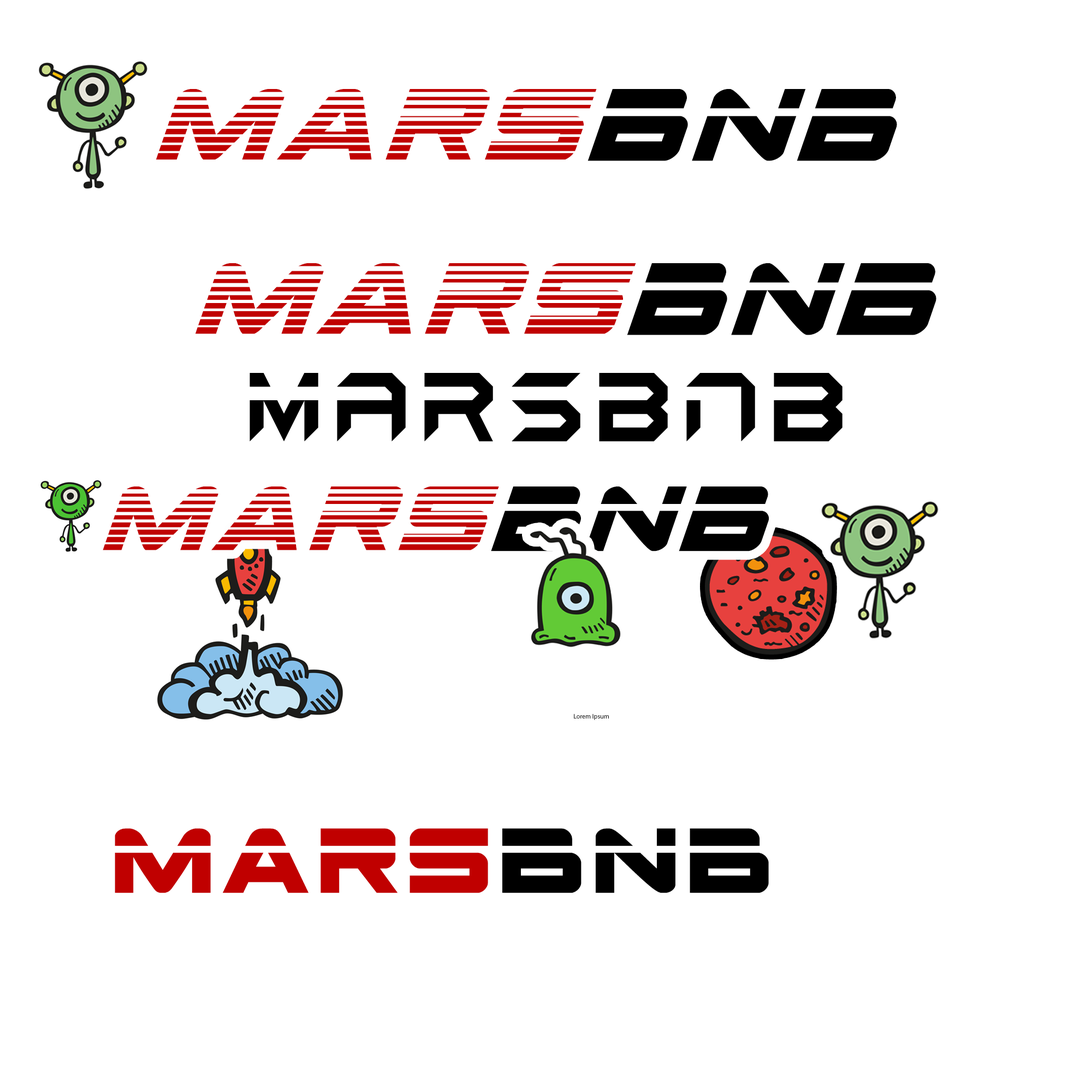
<style>
.page{position:relative;width:1092px;height:1092px;background:#ffffff}
.page>*{position:absolute;margin:0}
.t1{font:142.5px "SpaceRangerGradientItalic";letter-spacing:0.05em;color:#c00000}
.t2{font:142.5px "SpaceRangerLaserItalic";letter-spacing:0.05em;color:#000000}
.t3{font:109.2px "Aerospace";letter-spacing:0.05em;color:#000000}
.t4{font:128.1px "SpaceRangerGradientItalic";letter-spacing:0.05em;color:#c00000}
.t5{font:128.1px "SpaceRangerLaserItalic";letter-spacing:0.05em;color:#000000}
.t6{font:6.6px "MyriadPro-Regular";color:#000000}
.t7{font:127.8px "SpaceRangerLaser";letter-spacing:0.05em;color:#c00000}
.t8{font:127.8px "SpaceRangerLaser";letter-spacing:0.05em;color:#000000}
</style>
<div class="page">
<p class="t1" style="left:156px;top:89px;width:741px;height:72px">Mars<span class="t2">BNB</span></p>
<p class="t1" style="left:195px;top:263px;width:741px;height:72px">Mars<span class="t2">BNB</span></p>
<p class="t3" style="left:250px;top:373px;width:592px;height:69px">MarsBNB</p>
<p class="t4" style="left:103px;top:486px;width:666px;height:65px">Mars<span class="t5">BNB</span></p>
<p class="t6" style="left:574px;top:714px;width:35px;height:6px">Lorem Ipsum</p>
<p class="t7" style="left:115px;top:828px;width:654px;height:65px">Mars<span class="t8">BNB</span></p>
</div>
